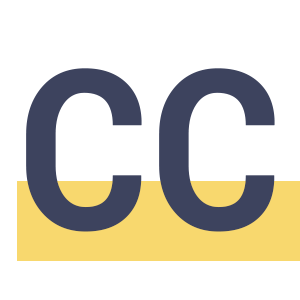
<style>
.page{position:relative;width:300px;height:300px;background:#ffffff}
.page>*{position:absolute;margin:0}
.t1{font:247.5px "Yantramanav-Bold";letter-spacing:0.005em;color:#3d435e;scale:0.93 1}
</style>
<div class="page">
<p class="t1" style="left:26px;top:68px;width:249px;height:164px">CC</p>
</div>
